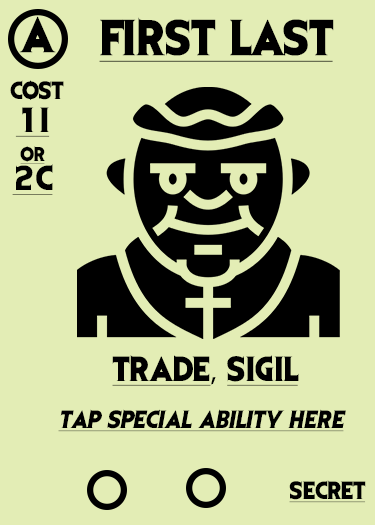
<style>
.page{position:relative;width:375px;height:525px;background:#e3edb5}
.page>*{position:absolute;margin:0}
.t1{font:41.7px "EvilDead";letter-spacing:-0.05em;color:#000000}
.t2{font:41.7px "EvilDead";color:#000000;text-decoration:underline}
.t3{font:20.8px "EvilDead";color:#000000}
.t4{font:29.2px/29.2px "EvilDead";color:#000000;text-decoration:underline}
.t5{font:16.7px/29.2px "EvilDead";color:#000000;text-decoration:underline}
.t6{font:29.2px "EvilDead";color:#000000;text-decoration:underline}
.t7{font:29.2px "MyriadPro-Regular";color:#000000}
.t8{font:20.8px "EvilDead";color:#000000;font-style:italic;text-decoration:underline}
.t9{font:20.8px "EvilDead";color:#000000;text-decoration:underline}
</style>
<div class="page">
<p class="t1" style="left:19px;top:16px;width:37px;height:37px">A</p>
<p class="t2" style="left:99px;top:17px;width:235px;height:45px">FIRST LAST</p>
<p class="t3" style="left:10px;top:80px;width:54px;height:20px">COST</p>
<p class="t4" style="left:12px;top:107px;width:41px;height:88px;text-align:center">1I<br><span class="t5">or<br></span>2C</p>
<p class="t6" style="left:112px;top:355px;width:187px;height:31px">TRADE<span class="t7">, </span>SIGIL</p>
<p class="t8" style="left:58px;top:409px;width:288px;height:23px">TAP SPECIAL ABILITY HERE</p>
<p class="t9" style="left:289px;top:480px;width:77px;height:23px">Secret</p>
</div>
